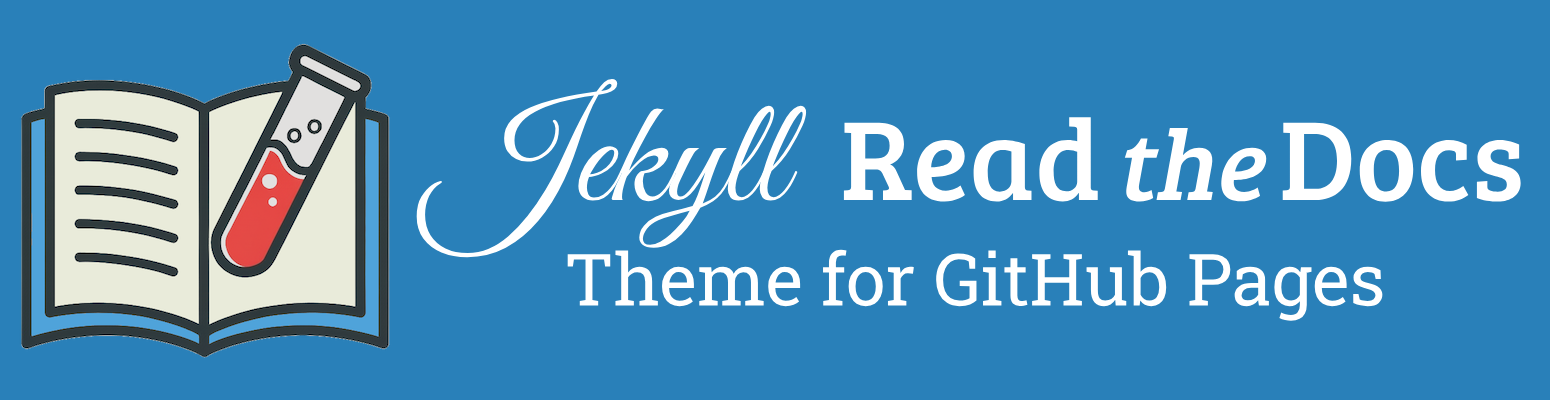
<style>
.page{position:relative;width:1550px;height:400px;background:#2980b9}
.page>*{position:absolute;margin:0}
.t1{font:72px "RobotoSlab-Regular";color:#ffffff}
.t2{font:150px "GreatVibes-Regular";color:#ffffff}
.t3{font:116px "BreeSerif-Regular";color:#ffffff}
.t4{font:101px "BreeSerif-Regular";color:#ffffff;font-style:italic}
</style>
<div class="page">
<p class="t1" style="left:416px;top:78px;width:1105px;height:243px;text-align:center"><span class="t2">Jekyll  </span><span class="t3">Read </span><span class="t4">the </span><span class="t3">Docs<br></span>Theme for GitHub Pages</p>
</div>
